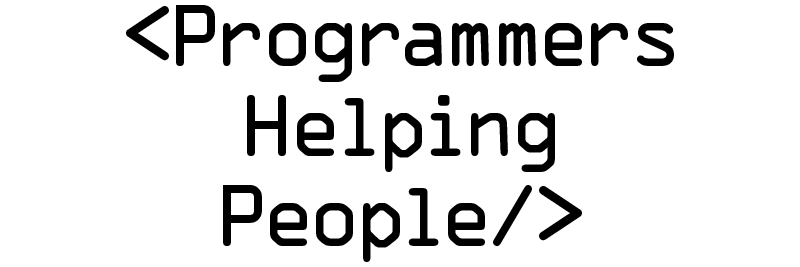
<style>
.page{position:relative;width:800px;height:267px;background:#ffffff}
.page>*{position:absolute;margin:0}
.t1{font:79px/90px "OCRAStd";letter-spacing:-0.1em;color:#000000}
</style>
<div class="page">
<p class="t1" style="left:126px;top:5px;width:548px;height:257px;text-align:center">&lt;Programmers<br>Helping<br>People/&gt;</p>
</div>
